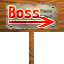
<style>
.page{position:relative;width:64px;height:64px;background:#ffffff}
.page>*{position:absolute;margin:0}
.t1{font:16px "mplus-1m-bold"}
</style>
<div class="page">
<p class="t1" style="left:8px;top:6px;width:31px;height:13px">Boss</p>
</div>
